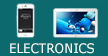
<style>
.page{position:relative;width:108px;height:56px;background:#0c696e}
.page>*{position:absolute;margin:0}
.t1{font:13px "Verdana";color:#fdfef9;scale:0.93 1}
</style>
<div class="page">
<p class="t1" style="left:10px;top:43px;width:84px;height:11px">ELECTRONICS</p>
</div>
